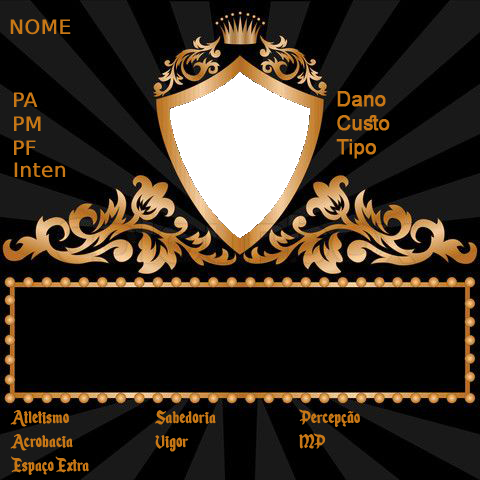
<style>
.page{position:relative;width:480px;height:480px;background:#000000}
.page>*{position:absolute;margin:0}
.t1{font:20px "EnchantedLand";color:#c77716;font-weight:bold}
.t2{font:20px "ArialMT";color:#c77716;font-weight:bold}
</style>
<div class="page">
<p class="t1" style="left:10px;top:19px;width:61px;height:16px">NOME</p>
<p class="t1" style="left:14px;top:92px;width:27px;height:63px">PA<br>PM<br>PF</p>
<p class="t2" style="left:336px;top:91px;width:54px;height:68px">Dano<br>Custo<br>Tipo</p>
<p class="t1" style="left:14px;top:162px;width:52px;height:16px">Inten</p>
<p class="t1" style="left:10px;top:409px;width:350px;height:66px">Atletismo   Sabedoria   Percepção  <br>Acrobacia   Vigor    MP    <br>Espaço Extra</p>
</div>
